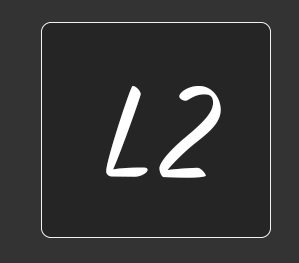
<style>
.page{position:relative;width:299px;height:263px;background:#252525}
.page>*{position:absolute;margin:0}
.t1{font:125px "ForeverBrushScript";color:#ffffff}
</style>
<div class="page">
<p class="t1" style="left:106px;top:86px;width:115px;height:92px">L2</p>
</div>
